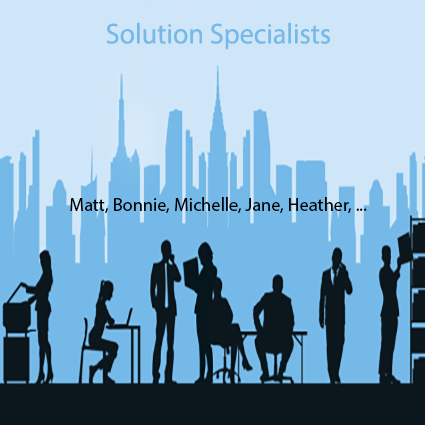
<style>
.page{position:relative;width:425px;height:425px;background:#cfe6f8}
.page>*{position:absolute;margin:0}
.t1{font:28.8px "MyriadPro-Regular";color:#75b9e8}
.t2{font:18.7px "MyriadPro-Regular";color:#030303}
</style>
<div class="page">
<p class="t1" style="left:106px;top:22px;width:224px;height:28px">Solution Specialists</p>
<p class="t2" style="left:70px;top:197px;width:297px;height:17px">Matt, Bonnie, Michelle, Jane, Heather, ...</p>
</div>
